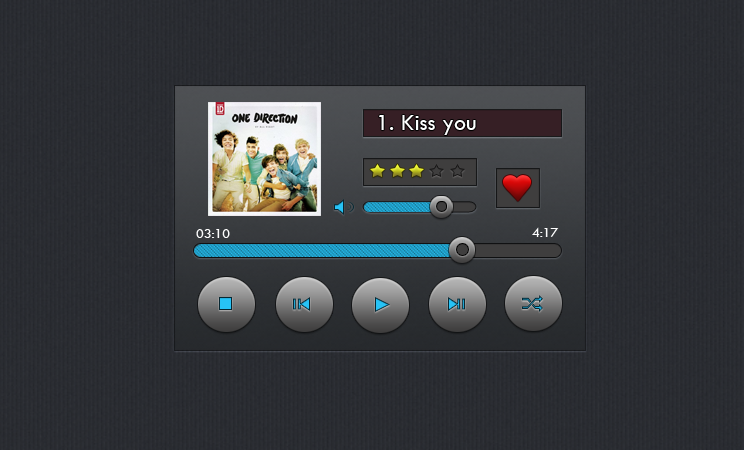
<style>
.page{position:relative;width:744px;height:450px}
.page>*{position:absolute;margin:0}
.t1{font:24px "TwCenMT-Regular";color:#fefefe}
.t2{font:14px "TwCenMT-Regular";color:#fefefe}
</style>
<div class="page">
<p class="t1" style="left:379px;top:115px;width:97px;height:20px">1. Kiss you</p>
<p class="t2" style="left:196px;top:229px;width:34px;height:9px">03:10</p>
<p class="t2" style="left:532px;top:227px;width:27px;height:10px">4:17</p>
</div>
